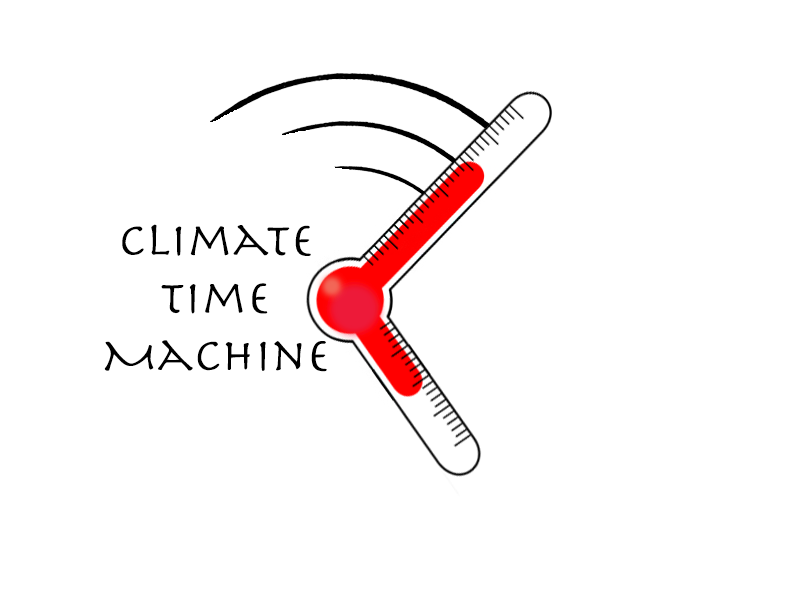
<style>
.page{position:relative;width:800px;height:600px;background:#ffffff}
.page>*{position:absolute;margin:0}
.t1{font:48px "Herculanum";color:#000000}
</style>
<div class="page">
<p class="t1" style="left:104px;top:224px;width:223px;height:148px;text-align:center">Climate<br>Time<br>Machine</p>
</div>
